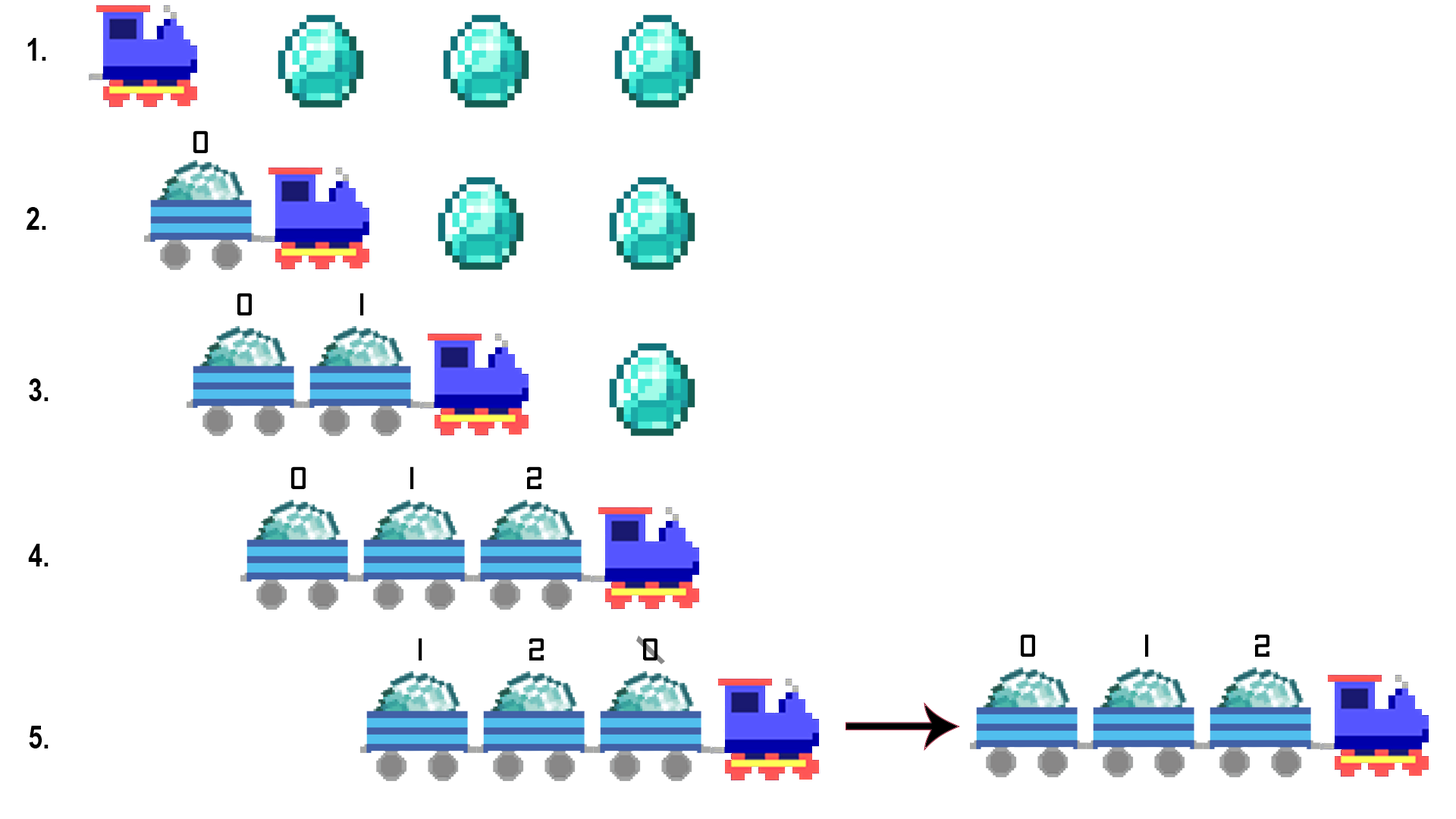
<style>
.page{position:relative;width:1456px;height:819px;background:#ffffff}
.page>*{position:absolute;margin:0}
.t1{font:31.6px "ArialNarrow-Bold";color:#000000}
.t2{font:31.6px "ApexMk2-Regular";color:#000000}
</style>
<div class="page">
<p class="t1" style="left:27px;top:38px;width:19px;height:23px">1.</p>
<p class="t2" style="left:193px;top:130px;width:15px;height:23px">0</p>
<p class="t1" style="left:26px;top:207px;width:20px;height:23px">2.</p>
<p class="t2" style="left:237px;top:293px;width:15px;height:22px">0</p>
<p class="t2" style="left:360px;top:293px;width:4px;height:22px">1</p>
<p class="t1" style="left:29px;top:378px;width:20px;height:23px">3.</p>
<p class="t2" style="left:291px;top:466px;width:15px;height:23px">0</p>
<p class="t2" style="left:410px;top:466px;width:4px;height:23px">1</p>
<p class="t2" style="left:527px;top:466px;width:14px;height:23px">2</p>
<p class="t1" style="left:28px;top:544px;width:21px;height:22px">4.</p>
<p class="t2" style="left:419px;top:638px;width:3px;height:22px">1</p>
<p class="t2" style="left:529px;top:638px;width:15px;height:22px">2</p>
<p class="t2" style="left:643px;top:638px;width:14px;height:22px">0</p>
<p class="t2" style="left:1021px;top:634px;width:14px;height:23px">0</p>
<p class="t2" style="left:1145px;top:634px;width:4px;height:23px">1</p>
<p class="t2" style="left:1255px;top:634px;width:14px;height:23px">2</p>
<p class="t1" style="left:29px;top:726px;width:20px;height:22px">5.</p>
</div>
